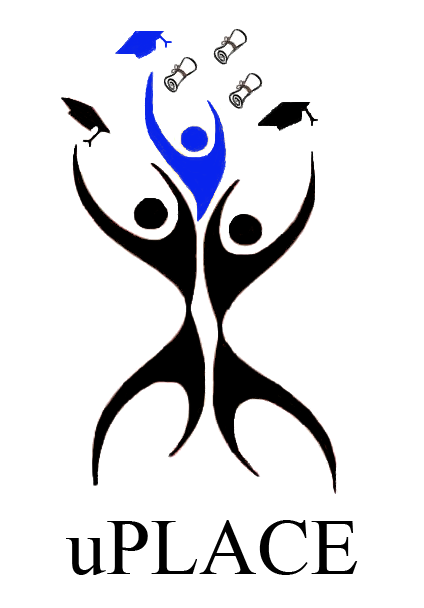
<style>
.page{position:relative;width:424px;height:608px;background:#ffffff}
.page>*{position:absolute;margin:0}
.t1{font:80px "TimesNewRomanPSMT";color:#000000}
</style>
<div class="page">
<p class="t1" style="left:66px;top:520px;width:292px;height:55px">uPLACE</p>
</div>
